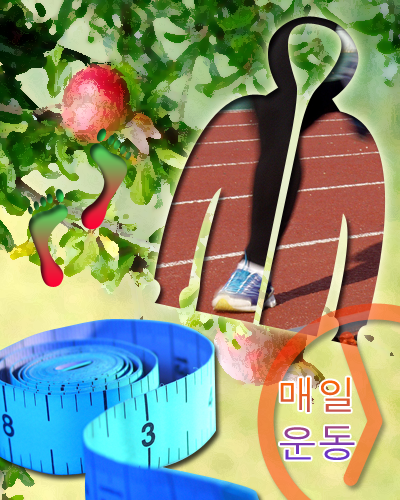
<style>
.page{position:relative;width:400px;height:500px}
.page>*{position:absolute;margin:0}
.t1{font:40px "Dotum"}
</style>
<div class="page">
<p class="t1" style="left:280px;top:377px;width:75px;height:83px">매일<br>운동</p>
</div>
